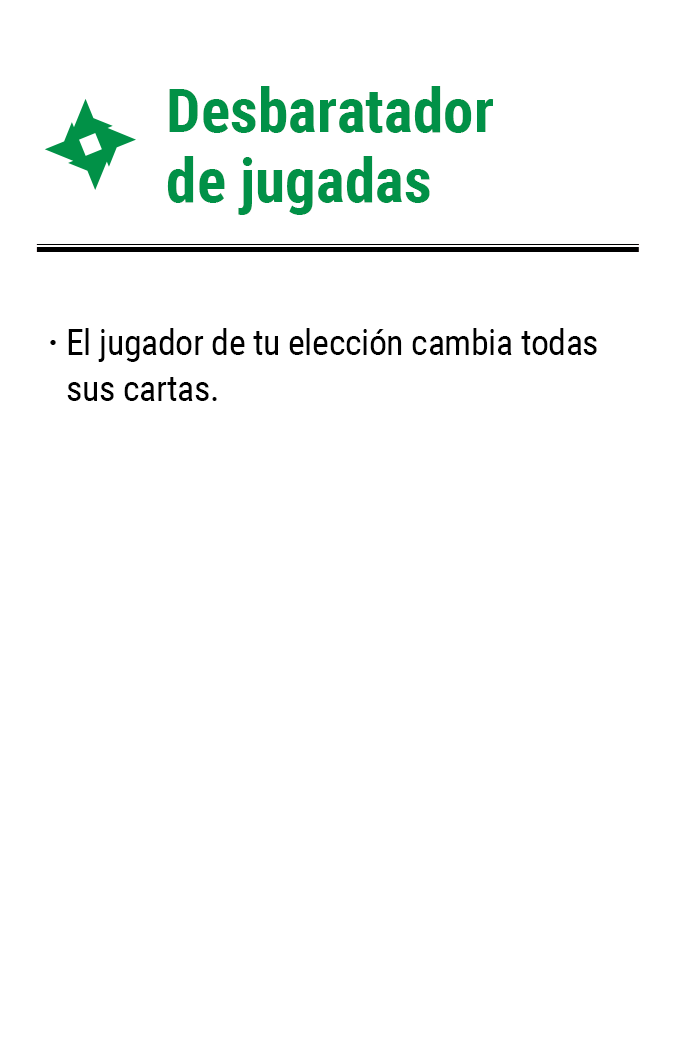
<style>
.page{position:relative;width:675px;height:1050px;background:#ffffff}
.page>*{position:absolute;margin:0}
.t1{font:61.2px/62.9px "RobotoCondensed-Bold";color:#019147}
.t2{font:35.8px/45.8px "RobotoCondensed-Regular";letter-spacing:-0.01em;color:#000000}
.t3{font:35.8px "RobotoCondensed-Bold";letter-spacing:-0.01em;color:#000000}
</style>
<div class="page">
<p class="t1" style="left:167px;top:86px;width:327px;height:129px">Desbaratador<br>de jugadas</p>
<p class="t2" style="left:67px;top:328px;width:530px;height:73px">El jugador de tu elección cambia todas sus cartas.</p>
<p class="t3" style="left:50px;top:340px;width:6px;height:5px">·</p>
</div>
